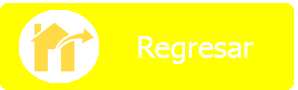
<style>
.page{position:relative;width:298px;height:90px;background:#ffff00}
.page>*{position:absolute;margin:0}
.t1{font:30px "Tahoma";color:#fcfdfd}
</style>
<div class="page">
<p class="t1" style="left:138px;top:36px;width:116px;height:28px">Regresar</p>
</div>
